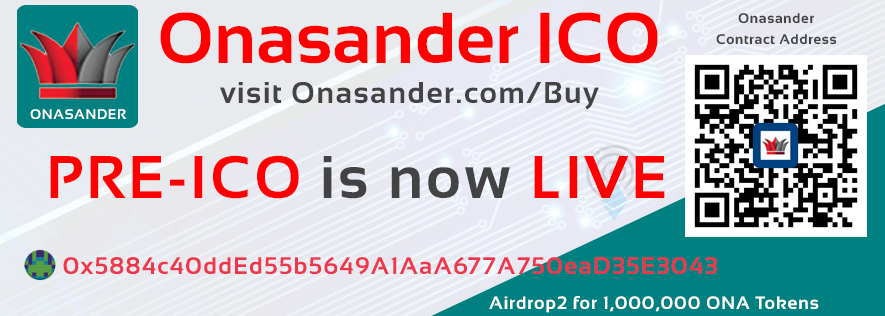
<style>
.page{position:relative;width:885px;height:316px}
.page>*{position:absolute;margin:0}
.t1{font:72px "Sansation-Bold";color:#ff0000}
.t2{font:14px "Sansation-Bold";letter-spacing:0.05em;color:#434244}
.t3{font:60px "Sansation-Bold";letter-spacing:0.05em;color:#ff0000}
.t4{font:60px "Sansation-Bold";letter-spacing:0.05em;color:#434244}
.t5{font:24px "Sansation-Bold";letter-spacing:0.05em;color:#ef364b}
.t6{font:18px "Sansation-Bold";letter-spacing:0.05em;color:#ffffff}
</style>
<div class="page">
<p class="t1" style="left:160px;top:12px;width:498px;height:52px">Onasander ICO</p>
<p class="t2" style="left:738px;top:13px;width:77px;height:11px">Onasander</p>
<p class="t2" style="left:716px;top:34px;width:121px;height:11px">Contract Address</p>
<p class="t3" style="left:50px;top:155px;width:615px;height:44px">PRE-ICO <span class="t4">is now</span> LIVE</p>
<p class="t5" style="left:63px;top:256px;width:654px;height:19px">0x5884c40ddEd55b5649A1AaA677A750eaD35E3043</p>
<p class="t6" style="left:489px;top:296px;width:330px;height:17px">Airdrop2 for 1,000,000 ONA Tokens</p>
</div>
